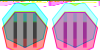
<style>
.page{position:relative;width:100px;height:50px}
.page>*{position:absolute;margin:0}
.t1{font:33.3px "MicrosoftYaHei"}
</style>
<div class="page">
<p class="t1" style="left:13px;top:12px;width:24px;height:26px">III</p>
<p class="t1" style="left:63px;top:12px;width:24px;height:26px">III</p>
</div>
